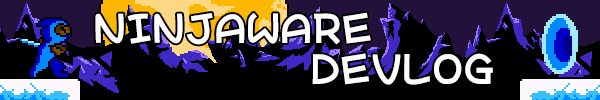
<style>
.page{position:relative;width:600px;height:100px;background:#000000}
.page>*{position:absolute;margin:0}
.t1{font:36px "WarioWareInc";letter-spacing:0.05em;color:#ffffff}
</style>
<div class="page">
<p class="t1" style="left:95px;top:12px;width:276px;height:33px">NINJAWARE</p>
<p class="t1" style="left:312px;top:53px;width:181px;height:32px">DEVLOG</p>
</div>
